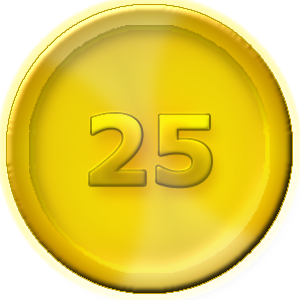
<style>
.page{position:relative;width:300px;height:300px}
.page>*{position:absolute;margin:0}
.t1{font:95.2px "Verdana-Bold";color:#a98f02}
</style>
<div class="page">
<p class="t1" style="left:90px;top:114px;width:121px;height:73px;opacity:0.74">25</p>
</div>
